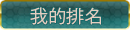
<style>
.page{position:relative;width:130px;height:30px}
.page>*{position:absolute;margin:0}
.t1{font:18px "GothicMB101Pr6N-Light";color:#e3cfc1}
</style>
<div class="page">
<p class="t1" style="left:30px;top:7px;width:71px;height:18px">我的排名</p>
</div>
